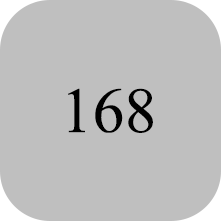
<style>
.page{position:relative;width:221px;height:221px;background:#bfbfbf}
.page>*{position:absolute;margin:0}
.t1{font:63.9px "TimesNewRomanPSMT";color:#000000}
</style>
<div class="page">
<p class="t1" style="left:68px;top:88px;width:85px;height:45px">168</p>
</div>
